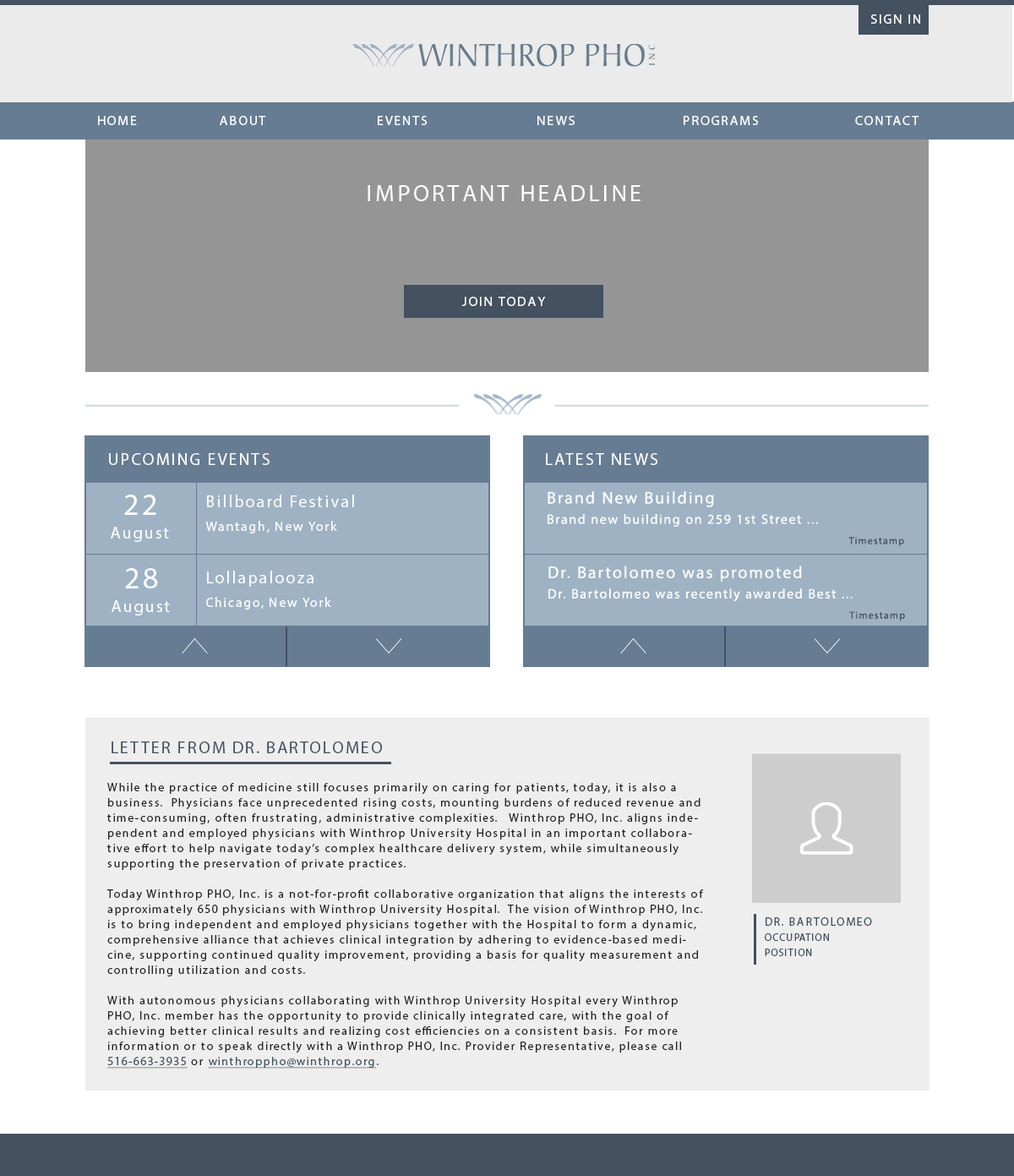
<style>
.page{position:relative;width:1014px;height:1176px;background:#ffffff}
.page>*{position:absolute;margin:0}
.t1{font:13.5px "MyriadPro-Regular";letter-spacing:0.1em;color:#ffffff;text-transform:uppercase}
.t2{font:23.7px "MyriadPro-Regular";letter-spacing:0.12em;color:#ffffff;text-transform:uppercase}
.t3{font:16.9px "MyriadPro-Regular";letter-spacing:0.1em;color:#ffffff;text-transform:uppercase}
.t4{font:16.9px/23.7px "MyriadPro-Regular";letter-spacing:0.1em;color:#ffffff}
.t5{font:30.4px/23.7px "MyriadPro-Regular";letter-spacing:0.1em;color:#ffffff}
.t6{font:13.5px/23.7px "MyriadPro-Regular";letter-spacing:0.1em;color:#ffffff}
.t7{font:13.5px/20.3px "MyriadPro-Regular";letter-spacing:0.1em;color:#ffffff}
.t8{font:16.9px/20.3px "MyriadPro-Regular";letter-spacing:0.1em;color:#ffffff}
.t9{font:10.1px/20.3px "MyriadPro-Regular";letter-spacing:0.1em;color:#435160}
.t10{font:16.8px/20.3px "MyriadPro-Regular";letter-spacing:0.1em;color:#ffffff}
.t11{font:16.9px "MyriadPro-Regular";letter-spacing:0.1em;color:#435160;text-transform:uppercase}
.t12{font:11.8px/15.2px "MyriadPro-Regular";letter-spacing:0.1em;color:#222222}
.t13{font:11.8px/15.2px "MyriadPro-Regular";letter-spacing:0.1em;color:#435160;text-decoration:underline}
.t14{font:10.1px/15.2px "MyriadPro-Regular";letter-spacing:0.1em;color:#435160}
.t15{font:11.8px/15.2px "MyriadPro-Regular";letter-spacing:0.1em;color:#435160}
</style>
<div class="page">
<p class="t1" style="left:871px;top:14px;width:49px;height:10px">Sign in</p>
<p class="t1" style="left:98px;top:116px;width:39px;height:9px">Home</p>
<p class="t1" style="left:220px;top:116px;width:46px;height:9px">About</p>
<p class="t1" style="left:378px;top:116px;width:49px;height:9px">Events</p>
<p class="t1" style="left:538px;top:116px;width:37px;height:9px">News</p>
<p class="t1" style="left:684px;top:116px;width:74px;height:9px">Programs</p>
<p class="t1" style="left:855px;top:116px;width:65px;height:9px">Contact</p>
<p class="t2" style="left:368px;top:185px;width:273px;height:16px">IMPORTANT HEADLINE</p>
<p class="t1" style="left:461px;top:297px;width:85px;height:9px">Join Today</p>
<p class="t3" style="left:109px;top:453px;width:161px;height:12px">Upcoming Events</p>
<p class="t3" style="left:546px;top:453px;width:112px;height:12px">Latest News</p>
<p class="t4" style="left:111px;top:494px;width:58px;height:48px;text-align:center"><span class="t5">22<br></span>August</p>
<p class="t4" style="left:205px;top:494px;width:149px;height:39px">Billboard Festival<br><span class="t6">Wantagh, New York</span></p>
<p class="t7" style="left:548px;top:491px;width:356px;height:55px"><span class="t8">Brand New Building<br></span>Brand new building on 259 1st Street ...<br><span class="t9">Timestamp<br></span>sadsa</p>
<p class="t4" style="left:112px;top:568px;width:58px;height:47px;text-align:center"><span class="t5">28<br></span>August</p>
<p class="t7" style="left:549px;top:565px;width:356px;height:56px"><span class="t10">Dr. Bartolomeo was promoted<br></span>Dr. Bartolomeo was recently awarded Best ...<br><span class="t9">Timestamp</span></p>
<p class="t6" style="left:206px;top:571px;width:125px;height:38px"><span class="t4">Lollapalooza<br></span>Chicago, New York</p>
<p class="t11" style="left:112px;top:741px;width:270px;height:12px">Letter from dr. bartolomeo</p>
<p class="t12" style="left:106px;top:783px;width:598px;height:285px">While the practice of medicine still focuses primarily on caring for patients, today, it is also a business.  Physicians face unprecedented rising costs, mounting burdens of reduced revenue and time-consuming, often frustrating, administrative complexities.   Winthrop PHO, Inc. aligns independent and employed physicians with Winthrop University Hospital in an important collaborative effort to help navigate today’s complex healthcare delivery system, while simultaneously supporting the preservation of private practices.   <br><br>Today Winthrop PHO, Inc. is a not-for-profit collaborative organization that aligns the interests of approximately 650 physicians with Winthrop University Hospital.  The vision of Winthrop PHO, Inc. is to bring independent and employed physicians together with the Hospital to form a dynamic, comprehensive alliance that achieves clinical integration by adhering to evidence-based medicine, supporting continued quality improvement, providing a basis for quality measurement and controlling utilization and costs. <br><br>With autonomous physicians collaborating with Winthrop University Hospital every Winthrop PHO, Inc. member has the opportunity to provide clinically integrated care, with the goal of achieving better clinical results and realizing cost efficiencies on a consistent basis.  For more information or to speak directly with a Winthrop PHO, Inc. Provider Representative, please call <span class="t13">516-663-3935</span> or <span class="t13">winthroppho@winthrop.org</span>.</p>
<p class="t14" style="left:765px;top:917px;width:107px;height:39px"><span class="t15">DR. BARTOLOMEO<br></span>OCCUPATION<br>POSITION</p>
</div>
